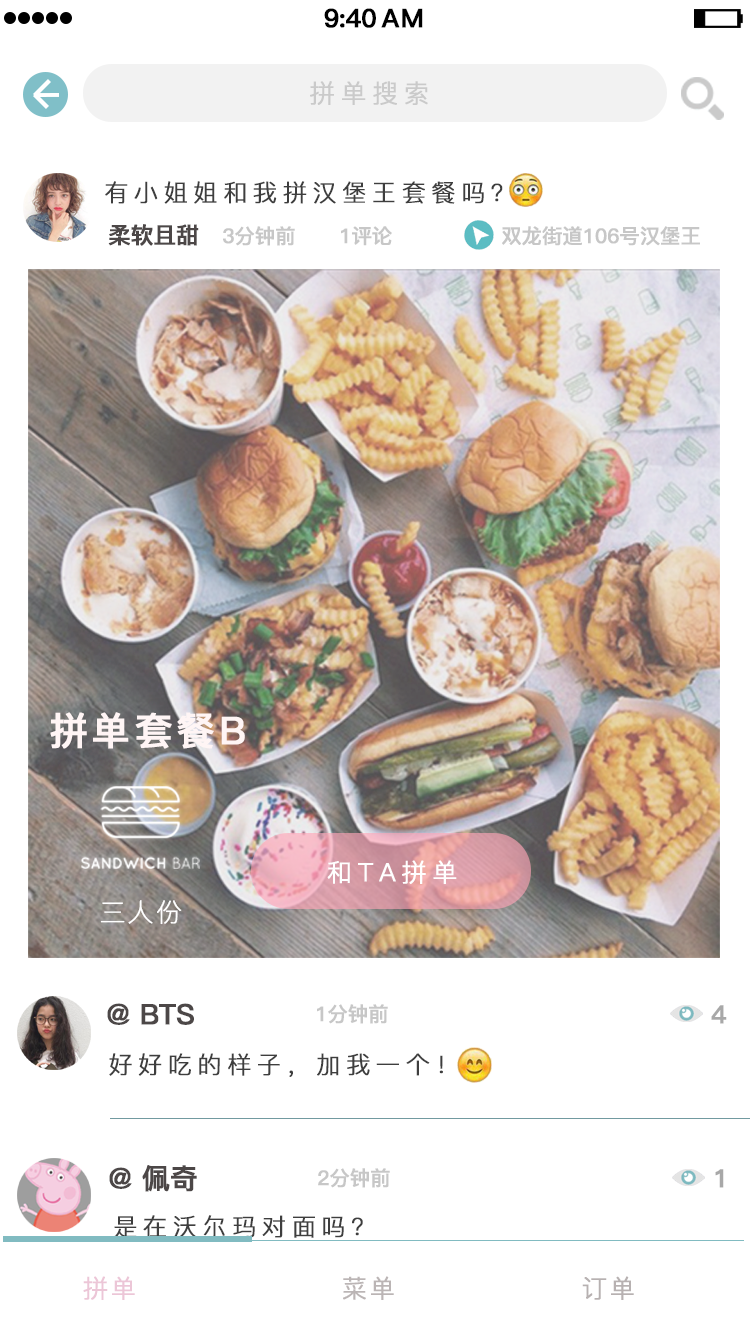
<style>
.page{position:relative;width:750px;height:1334px;background:#ffffff}
.page>*{position:absolute;margin:0}
.t1{font:25.4px "PingFang-SC-Bold";letter-spacing:-0.028em;color:#000000;font-weight:bold}
.t2{font:25.4px "PingFang-SC-Bold";letter-spacing:0.052em;color:#000000;font-weight:bold}
.t3{font:25.4px "PingFang-SC-Regular";letter-spacing:0.212em;color:#cacaca;font-weight:bold}
.t4{font:24px "PingFang-SC-Regular";letter-spacing:0.212em;color:#3e3e3e;font-weight:bold}
.t5{font:22.7px "PingFang-SC-Bold";letter-spacing:-0.028em;color:#4c4747;font-weight:bold}
.t6{font:20.4px "PingFang-SC-Bold";letter-spacing:-0.028em;color:#c7c7c7;font-weight:bold}
.t7{font:38.2px "PingFang-SC-Bold";letter-spacing:0.085em;color:#fff5f5;font-weight:bold}
.t8{font:25.1px "PingFang-SC-Regular";letter-spacing:0.212em;color:#ffffff;font-weight:bold}
.t9{font:25.5px "PingFang-SC-Light";letter-spacing:0.085em;color:#ffffff;font-weight:bold}
.t10{font:28px "PingFang-SC-Bold";letter-spacing:-0.028em;color:#4c4747;font-weight:bold}
.t11{font:25px "PingFang-SC-Bold";letter-spacing:0.212em;color:#a8a8a8;font-weight:bold}
.t12{font:25px "PingFang-SC-Regular";letter-spacing:0.085em;color:#ecc6d7;font-weight:bold}
.t13{font:25px "PingFang-SC-Regular";letter-spacing:0.085em;color:#bbb5b5;font-weight:bold}
.t14{font:25px "PingFang-SC-Regular";letter-spacing:0.085em;color:#b7b1b1;font-weight:bold}
</style>
<div class="page">
<p class="t1" style="left:324px;top:8px;width:52px;height:20px">9:40</p>
<p class="t2" style="left:381px;top:8px;width:42px;height:20px">AM</p>
<p class="t3" style="left:310px;top:81px;width:118px;height:24px">拼单搜索</p>
<p class="t4" style="left:105px;top:181px;width:398px;height:23px">有小姐姐和我拼汉堡王套餐吗？</p>
<p class="t5" style="left:108px;top:224px;width:91px;height:22px">柔软且甜</p>
<p class="t6" style="left:223px;top:226px;width:72px;height:20px">3分钟前</p>
<p class="t6" style="left:341px;top:226px;width:51px;height:20px">1评论</p>
<p class="t6" style="left:502px;top:226px;width:198px;height:20px">双龙街道106号汉堡王</p>
<p class="t7" style="left:50px;top:712px;width:195px;height:37px">拼单套餐B</p>
<p class="t8" style="left:327px;top:860px;width:130px;height:24px">和TA拼单</p>
<p class="t9" style="left:100px;top:900px;width:82px;height:25px">三人份</p>
<p class="t10" style="left:107px;top:1003px;width:87px;height:22px">@ BTS</p>
<p class="t6" style="left:317px;top:1004px;width:71px;height:20px">1分钟前</p>
<p class="t11" style="left:711px;top:1005px;width:16px;height:19px">4</p>
<p class="t4" style="left:109px;top:1053px;width:334px;height:24px">好好吃的样子，加我一个！</p>
<p class="t10" style="left:109px;top:1165px;width:88px;height:27px">@ 佩奇</p>
<p class="t6" style="left:318px;top:1168px;width:72px;height:20px">2分钟前</p>
<p class="t11" style="left:715px;top:1169px;width:9px;height:19px">1</p>
<p class="t4" style="left:114px;top:1215px;width:249px;height:23px">是在沃尔玛对面吗？</p>
<p class="t12" style="left:83px;top:1276px;width:52px;height:24px">拼单</p>
<p class="t13" style="left:343px;top:1276px;width:51px;height:24px">菜单</p>
<p class="t14" style="left:582px;top:1276px;width:52px;height:24px">订单</p>
</div>
